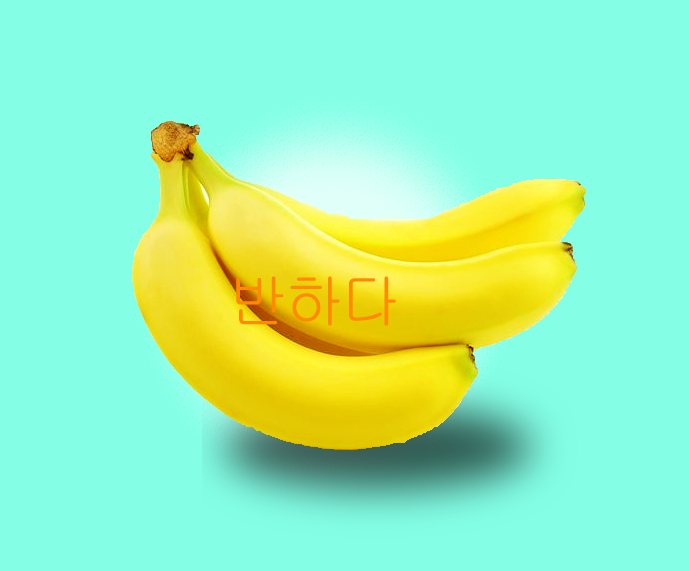
<style>
.page{position:relative;width:690px;height:571px;background:#84ffe6}
.page>*{position:absolute;margin:0}
.t1{font:60px "Gulim";letter-spacing:-0.06em;color:#ff8a00}
</style>
<div class="page">
<p class="t1" style="left:236px;top:276px;width:160px;height:50px">반하다</p>
</div>
